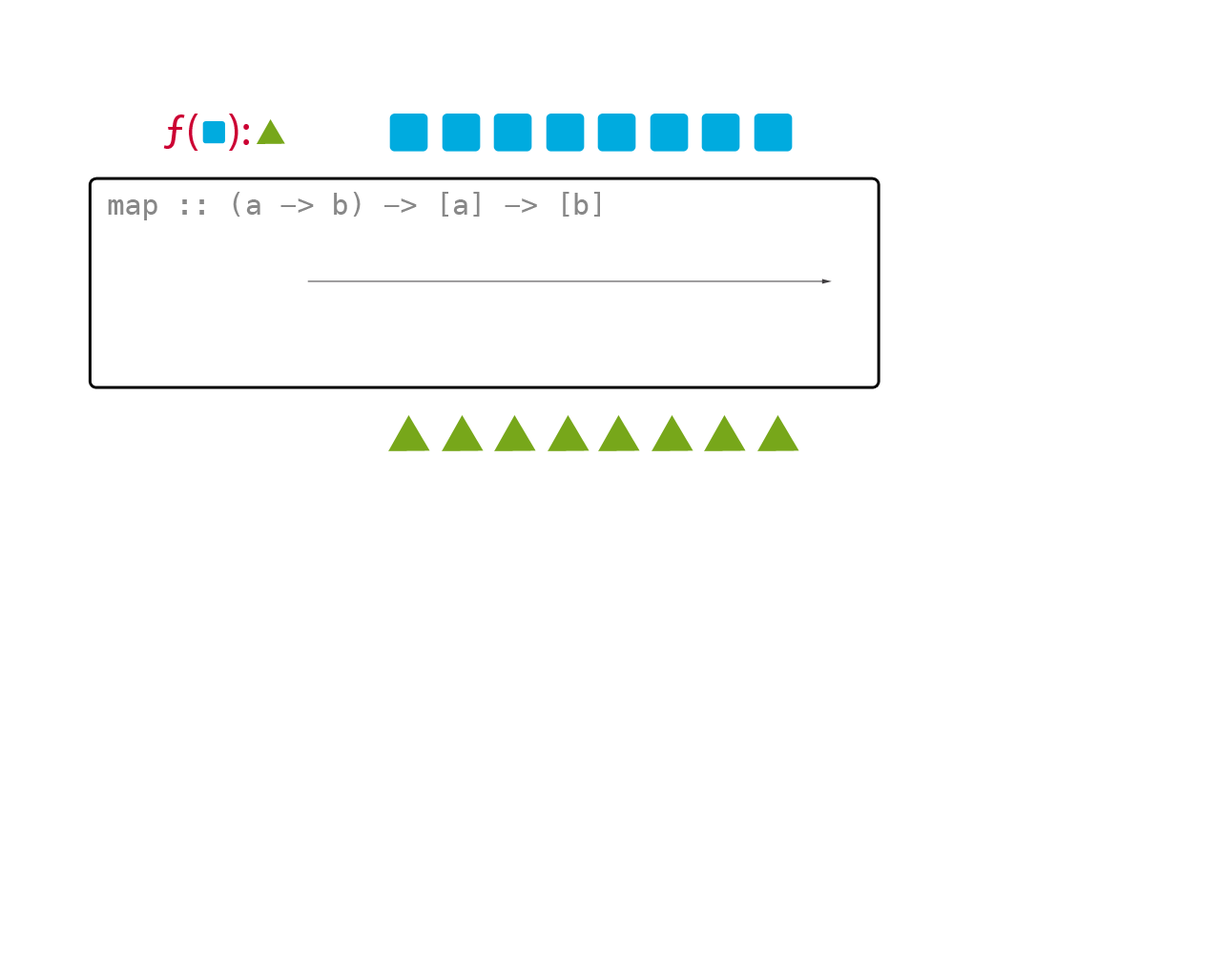
<style>
.page{position:relative;width:1221px;height:977px;background:#ffffff}
.page>*{position:absolute;margin:0}
.t1{font:45.8px "MyriadPro-Regular";color:#cc0033}
.t2{font:28.6px "Menlo-Regular";color:#888888}
</style>
<div class="page">
<p class="t1" style="left:163px;top:114px;width:86px;height:37px">ƒ(   ):</p>
<p class="t2" style="left:108px;top:192px;width:492px;height:28px">map :: (a -&gt; b) -&gt; [a] -&gt; [b]</p>
</div>
